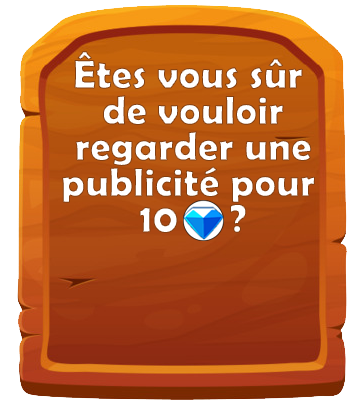
<style>
.page{position:relative;width:360px;height:414px;background:#ffffff}
.page>*{position:absolute;margin:0}
.t1{font:40.9px/36px "BerlinSansFBDemi-Bold";color:#ffffff}
</style>
<div class="page">
<p class="t1" style="left:62px;top:51px;width:253px;height:182px;text-align:center">Êtes vous sûr <br>de vouloir<br>regarder une<br>publicité pour <br>10     ?</p>
</div>
